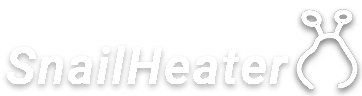
<style>
.page{position:relative;width:362px;height:96px;background:#ffffff}
.page>*{position:absolute;margin:0}
.t1{font:50px "Roboto-MediumItalic";letter-spacing:0.05em;color:#ffffff}
</style>
<div class="page">
<p class="t1" style="left:7px;top:46px;width:281px;height:38px">SnailHeater</p>
</div>
